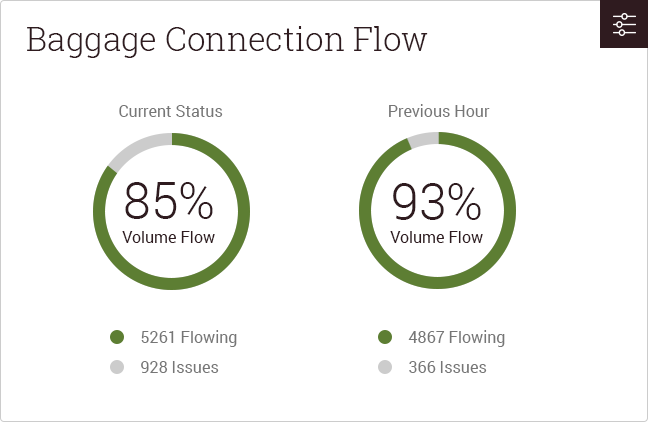
<style>
.page{position:relative;width:648px;height:422px;background:#ffffff}
.page>*{position:absolute;margin:0}
.t1{font:33px "RobotoSlab-Light";color:#2f1b1f}
.t2{font:16px "Roboto-Regular";color:#767676}
.t3{font:50px "Roboto-Light";color:#2f1b1f}
.t4{font:16px "Roboto-Regular";color:#2f1b1f}
</style>
<div class="page">
<p class="t1" style="left:27px;top:26px;width:401px;height:32px">Baggage Connection Flow</p>
<p class="t2" style="left:119px;top:105px;width:104px;height:12px">Current Status</p>
<p class="t2" style="left:389px;top:104px;width:101px;height:13px">Previous Hour</p>
<p class="t3" style="left:125px;top:182px;width:88px;height:37px">85%</p>
<p class="t3" style="left:393px;top:183px;width:88px;height:37px">93%</p>
<p class="t4" style="left:122px;top:231px;width:93px;height:12px">Volume Flow</p>
<p class="t4" style="left:390px;top:231px;width:93px;height:12px">Volume Flow</p>
<p class="t2" style="left:141px;top:330px;width:96px;height:17px">5261 Flowing</p>
<p class="t2" style="left:408px;top:330px;width:97px;height:17px">4867 Flowing</p>
<p class="t2" style="left:141px;top:361px;width:78px;height:12px">928 Issues</p>
<p class="t2" style="left:409px;top:361px;width:78px;height:12px">366 Issues</p>
</div>
